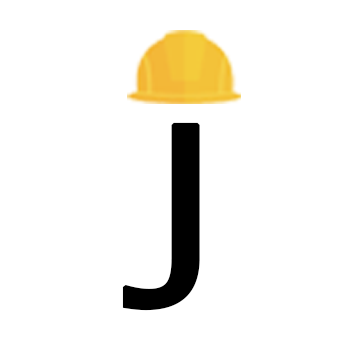
<style>
.page{position:relative;width:360px;height:360px;background:#ffffff}
.page>*{position:absolute;margin:0}
.t1{font:210.7px "LucidaSansUnicode";letter-spacing:-0.03em;color:#000000;font-weight:bold;scale:1.11 1}
</style>
<div class="page">
<p class="t1" style="left:122px;top:122px;width:78px;height:189px">J</p>
</div>
